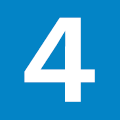
<style>
.page{position:relative;width:120px;height:120px;background:#0384c6}
.page>*{position:absolute;margin:0}
.t1{font:120px "AzeretMono-Medium";color:#ffffff}
</style>
<div class="page">
<p class="t1" style="left:24px;top:17px;width:71px;height:85px">4</p>
</div>
